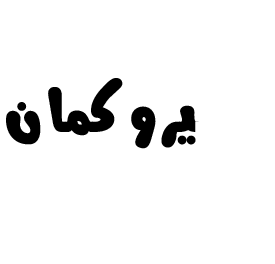
<style>
.page{position:relative;width:275px;height:264px;background:#ffffff}
.page>*{position:absolute;margin:0}
.t1{font:70px "MRT_Ramollah-Bold";color:#000000}
.t2{font:70px "MRT_Ramollah-Bold";color:#ffffff}
</style>
<div class="page">
<p class="t1" style="left:6px;top:78px;width:263px;height:71px"><span class="t2">تـــ</span>یروکمان</p>
</div>
